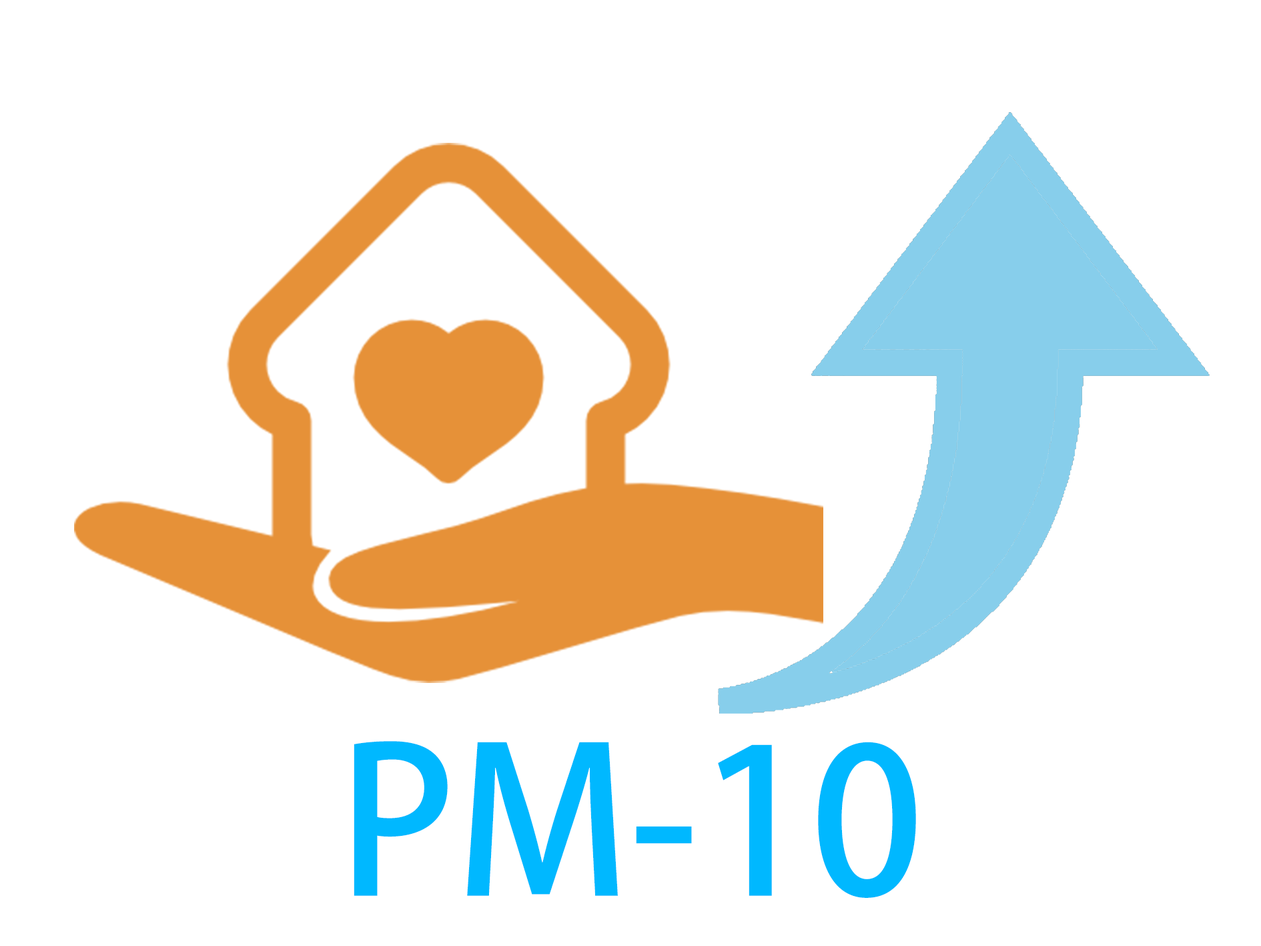
<style>
.page{position:relative;width:1261px;height:946px;background:#ffffff}
.page>*{position:absolute;margin:0}
.t1{font:200.2px "AdobeHeitiStd-Regular";color:#00b8ff}
</style>
<div class="page">
<p class="t1" style="left:354px;top:741px;width:562px;height:156px">PM-10</p>
</div>
